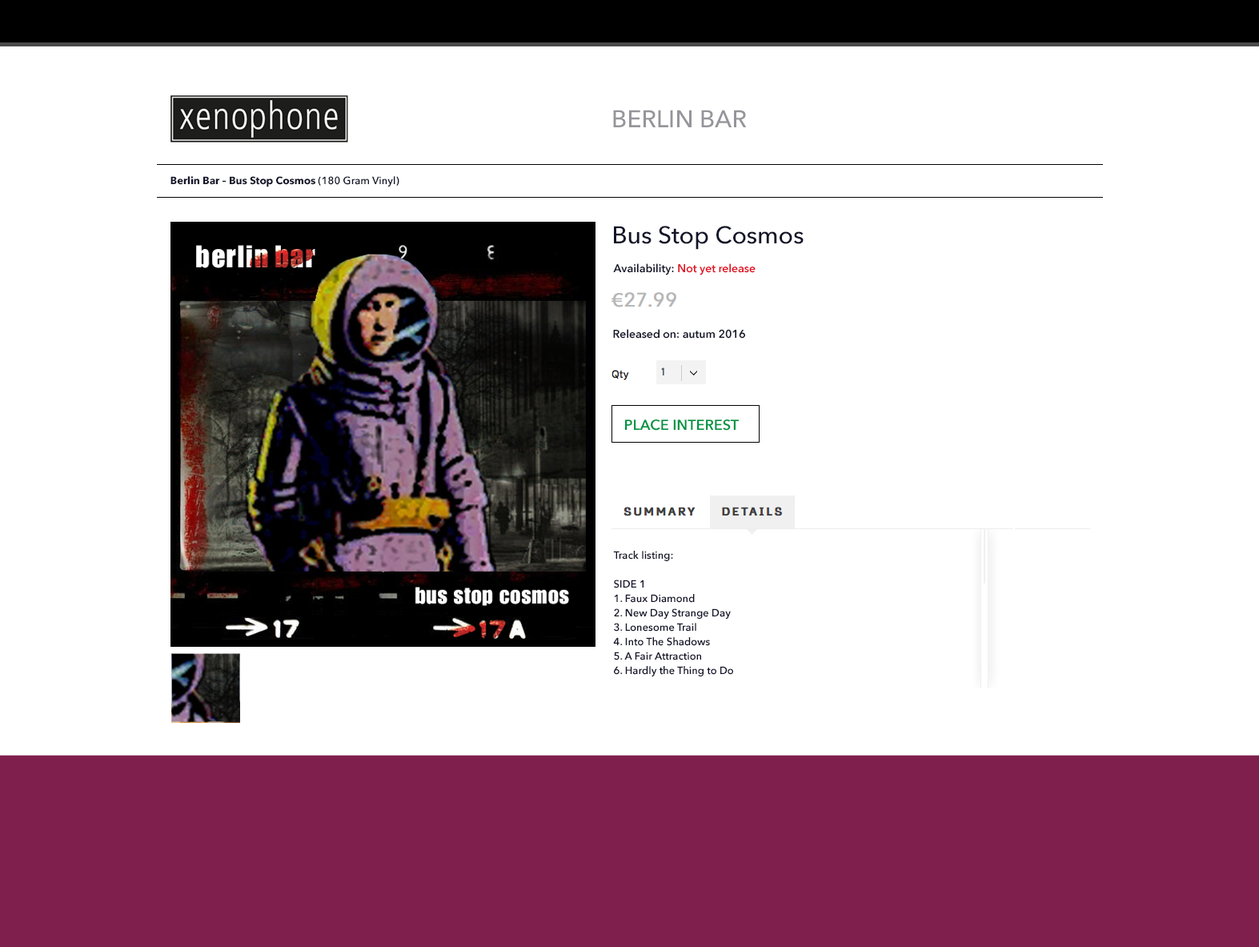
<style>
.page{position:relative;width:1259px;height:947px;background:#ffffff}
.page>*{position:absolute;margin:0}
.t1{font:24px "AvenirNext-Medium";color:#95959b}
.t2{font:10.4px "AvenirNext-Bold";color:#131429}
.t3{font:10.4px "AvenirNext-DemiBold";color:#131429}
.t4{font:24px "AvenirNext-Medium";color:#131429}
.t5{font:11.2px "AvenirNext-DemiBold";color:#e10f21}
.t6{font:11.2px "AvenirNext-DemiBold";color:#131429}
.t7{font:14.4px "AvenirNext-DemiBold";color:#009544}
.t8{font:10.4px/14.4px "AvenirNext-DemiBold";color:#131429}
</style>
<div class="page">
<p class="t1" style="left:613px;top:110px;width:134px;height:17px">BERLIN BAR</p>
<p class="t2" style="left:171px;top:176px;width:228px;height:11px">Berlin Bar – Bus Stop Cosmos<span class="t3"> (180 Gram Vinyl)</span></p>
<p class="t4" style="left:614px;top:226px;width:190px;height:24px">Bus Stop Cosmos</p>
<p class="t5" style="left:613px;top:263px;width:143px;height:12px"><span class="t6">Availability: </span>Not yet release</p>
<p class="t6" style="left:613px;top:329px;width:132px;height:10px">Released on: autum 2016</p>
<p class="t7" style="left:625px;top:419px;width:114px;height:12px">PLACE INTEREST</p>
<p class="t8" style="left:613px;top:551px;width:120px;height:125px">Track listing:<br><br>SIDE 1<br>1. Faux Diamond<br>2. New Day Strange Day<br>3. Lonesome Trail<br>4. Into The Shadows<br>5. A Fair Attraction<br>6. Hardly the Thing to Do</p>
</div>
